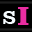
<style>
.page{position:relative;width:32px;height:32px;background:#000000}
.page>*{position:absolute;margin:0}
.t1{font:27.5px "ClarendonBT-Roman";letter-spacing:-0.05em;color:#f6fbff}
.t2{font:26.4px "ClarendonBT-Black";letter-spacing:-0.08em;color:#ea2da1}
</style>
<div class="page">
<p class="t1" style="left:3px;top:11px;width:13px;height:13px">s</p>
<p class="t2" style="left:18px;top:7px;width:11px;height:18px">I</p>
</div>
